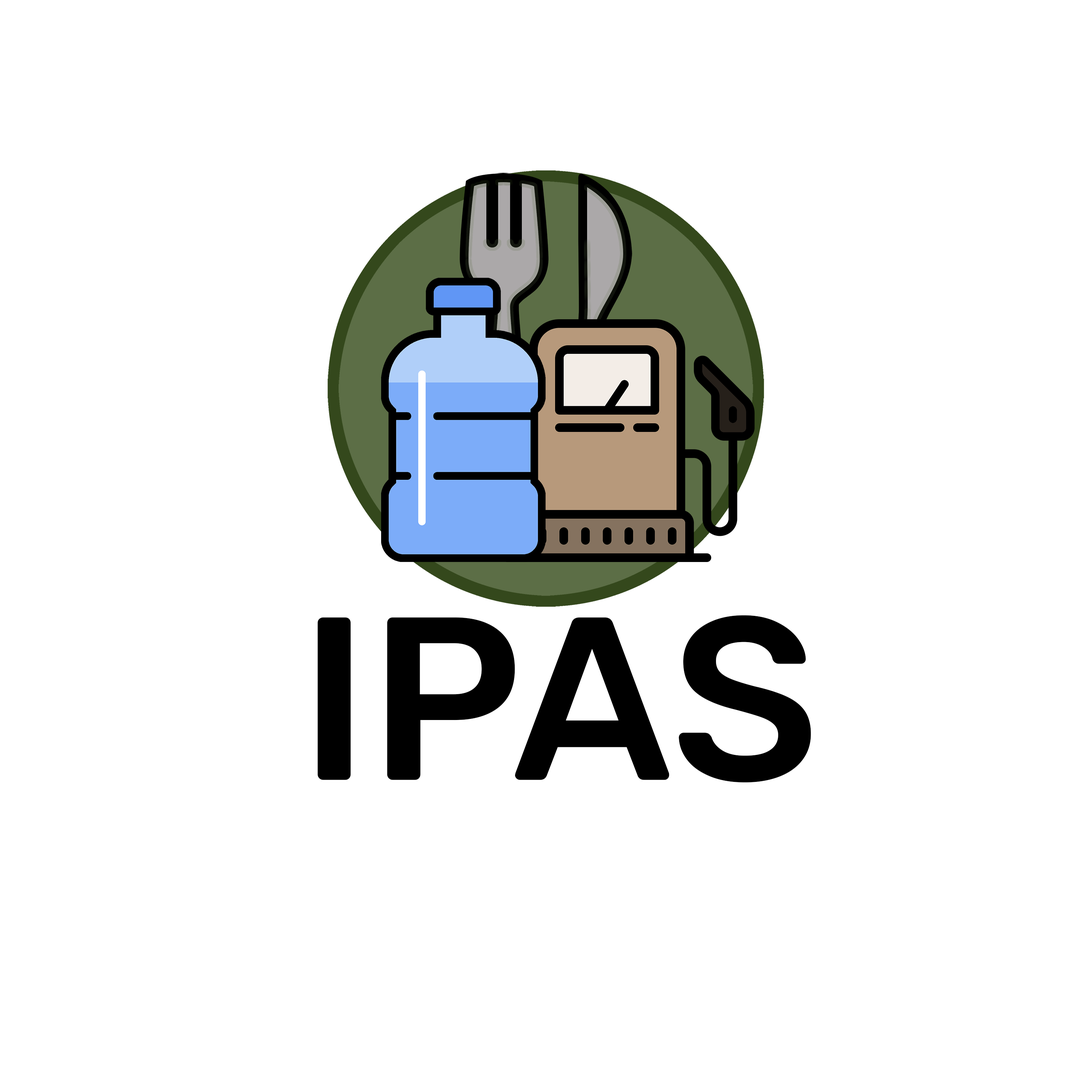
<style>
.page{position:relative;width:1092px;height:1092px;background:#ffffff}
.page>*{position:absolute;margin:0}
.t1{font:232px "Rubik-Medium";color:#000000}
</style>
<div class="page">
<p class="t1" style="left:317px;top:615px;width:494px;height:168px">IPAS</p>
</div>
